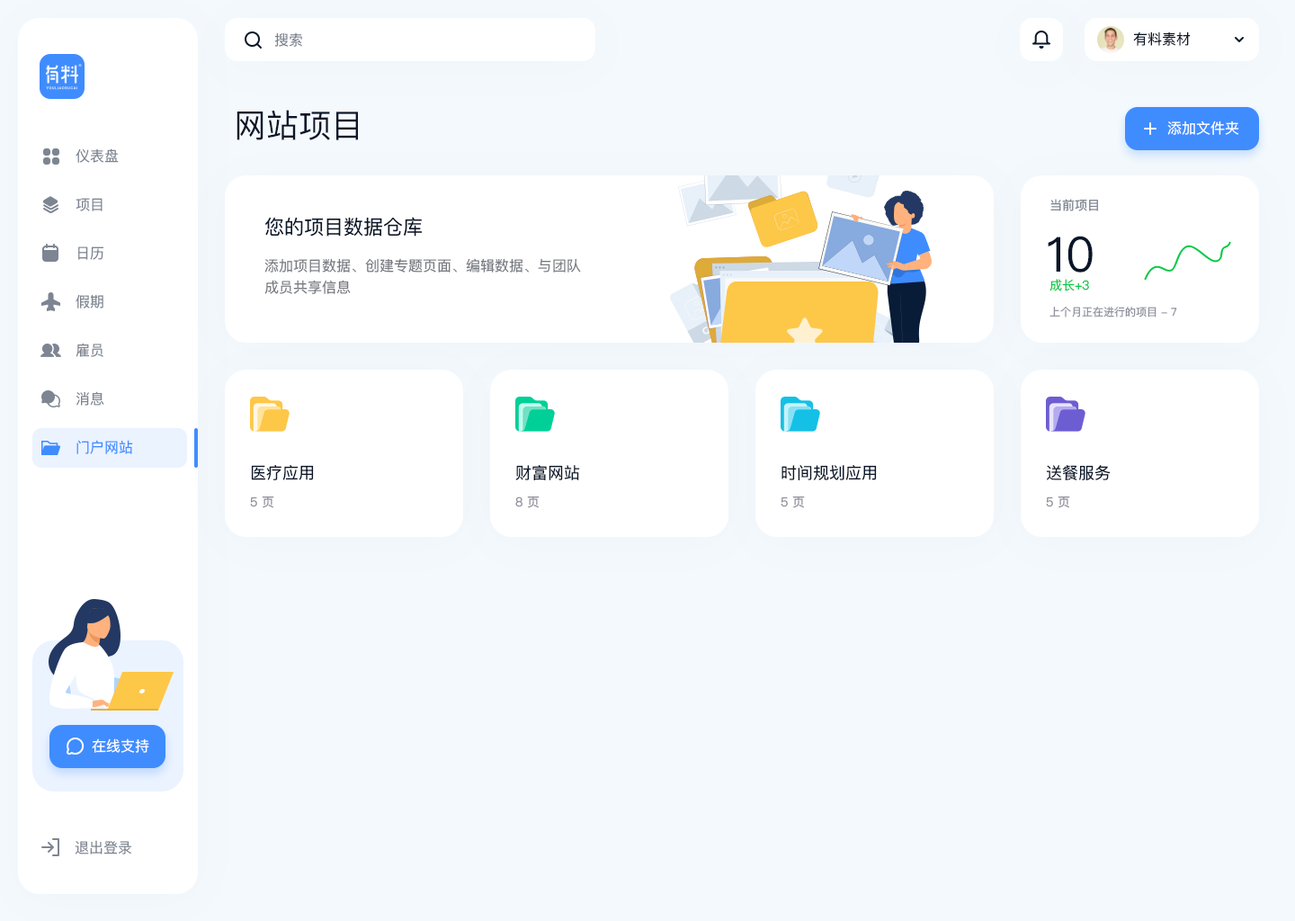
<style>
.page{position:relative;width:1295px;height:921px;background:#f4f9fd}
.page>*{position:absolute;margin:0}
.t1{font:14.4px "PingFangSC-Regular";color:#7d8592}
.t2{font:14.4px "PingFangSC-Regular";color:#0a1629}
.t3{font:32.4px "PingFangSC-Regular";color:#0a1629}
.t4{font:14.4px "PingFangSC-Regular";color:#ffffff}
.t5{font:12.6px "PingFangSC-Regular";color:#7d8592}
.t6{font:19.8px "PingFangSC-Regular";color:#0a1629}
.t7{font:48.6px "PingFangSC-Regular";color:#0a1629}
.t8{font:14.4px/21.6px "PingFangSC-Regular";color:#777a80}
.t9{font:12.6px "PingFangSC-Regular";color:#0ac947}
.t10{font:10.8px "PingFangSC-Regular";color:#91929e}
.t11{font:14.4px "PingFangSC-Regular";color:#3f8cff}
.t12{font:16.2px "PingFangSC-Regular";color:#0a1629}
.t13{font:12.6px "PingFangSC-Regular";color:#91929e}
</style>
<div class="page">
<p class="t1" style="left:274px;top:32px;width:28px;height:15px">搜索</p>
<p class="t2" style="left:1133px;top:31px;width:58px;height:15px">有料素材</p>
<p class="t3" style="left:237px;top:110px;width:121px;height:30px">网站项目</p>
<p class="t4" style="left:1167px;top:121px;width:72px;height:14px">添加文件夹</p>
<p class="t1" style="left:76px;top:148px;width:43px;height:15px">仪表盘</p>
<p class="t1" style="left:76px;top:198px;width:27px;height:13px">项目</p>
<p class="t5" style="left:1050px;top:199px;width:48px;height:12px">当前项目</p>
<p class="t6" style="left:264px;top:217px;width:159px;height:20px">您的项目数据仓库</p>
<p class="t7" style="left:1048px;top:236px;width:45px;height:36px">10</p>
<p class="t1" style="left:78px;top:246px;width:25px;height:14px">日历</p>
<p class="t8" style="left:264px;top:258px;width:317px;height:36px">添加项目数据、创建专题页面、编辑数据、与团队成员共享信息</p>
<p class="t9" style="left:1049px;top:279px;width:40px;height:12px">成长+3</p>
<p class="t1" style="left:76px;top:294px;width:27px;height:14px">假期</p>
<p class="t10" style="left:1049px;top:307px;width:128px;height:10px">上个月正在进行的项目 - 7</p>
<p class="t1" style="left:76px;top:343px;width:27px;height:14px">雇员</p>
<p class="t1" style="left:76px;top:391px;width:28px;height:15px">消息</p>
<p class="t11" style="left:76px;top:440px;width:57px;height:14px">门户网站</p>
<p class="t12" style="left:251px;top:465px;width:63px;height:15px">医疗应用</p>
<p class="t12" style="left:515px;top:465px;width:65px;height:15px">财富网站</p>
<p class="t12" style="left:781px;top:465px;width:96px;height:15px">时间规划应用</p>
<p class="t12" style="left:1046px;top:465px;width:65px;height:15px">送餐服务</p>
<p class="t13" style="left:250px;top:496px;width:24px;height:12px">5 页</p>
<p class="t13" style="left:515px;top:496px;width:25px;height:12px">8 页</p>
<p class="t13" style="left:781px;top:496px;width:24px;height:12px">5 页</p>
<p class="t13" style="left:1046px;top:496px;width:24px;height:12px">5 页</p>
<p class="t4" style="left:92px;top:738px;width:57px;height:15px">在线支持</p>
<p class="t1" style="left:75px;top:840px;width:56px;height:14px">退出登录</p>
</div>
